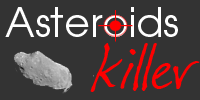
<style>
.page{position:relative;width:200px;height:100px;background:#333333}
.page>*{position:absolute;margin:0}
.t1{font:40px "AvantGardeGothicC-Book";color:#ffffff}
.t2{font:60px "Festus";color:#fe0000}
</style>
<div class="page">
<p class="t1" style="left:5px;top:7px;width:173px;height:30px">Asteroids</p>
<p class="t2" style="left:90px;top:43px;width:110px;height:49px">killer</p>
</div>
